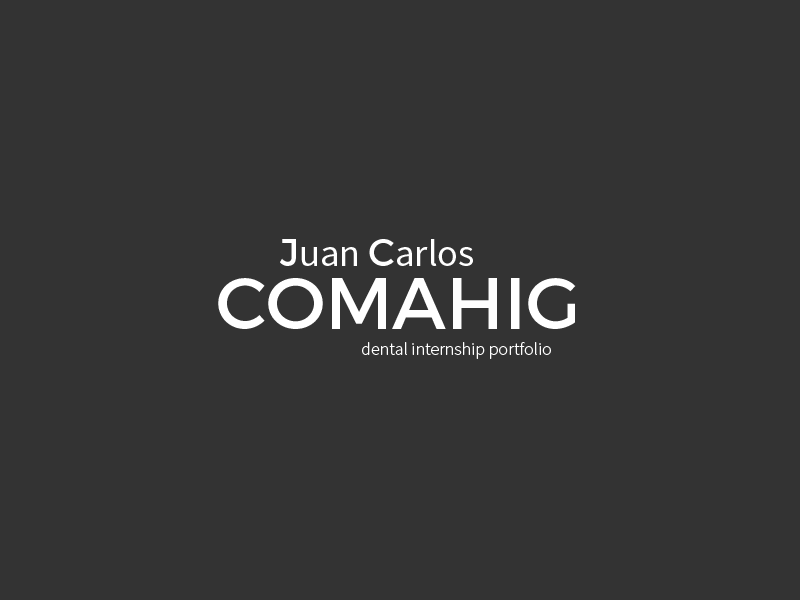
<style>
.page{position:relative;width:800px;height:600px;background:#333333}
.page>*{position:absolute;margin:0}
.t1{font:37.5px "SourceSansPro-Regular";color:#ffffff}
.t2{font:37.5px "Montserrat-Regular";color:#ffffff}
.t3{font:72.5px "Montserrat-Regular";color:#ffffff}
.t4{font:18px "SourceSansPro-Light";color:#ffffff}
</style>
<div class="page">
<p class="t1" style="left:280px;top:239px;width:193px;height:27px"><span class="t2">J</span>uan <span class="t2">C</span>arlos</p>
<p class="t3" style="left:218px;top:278px;width:358px;height:51px">COMAHIG</p>
<p class="t4" style="left:362px;top:342px;width:189px;height:17px">dental internship portfolio</p>
</div>
